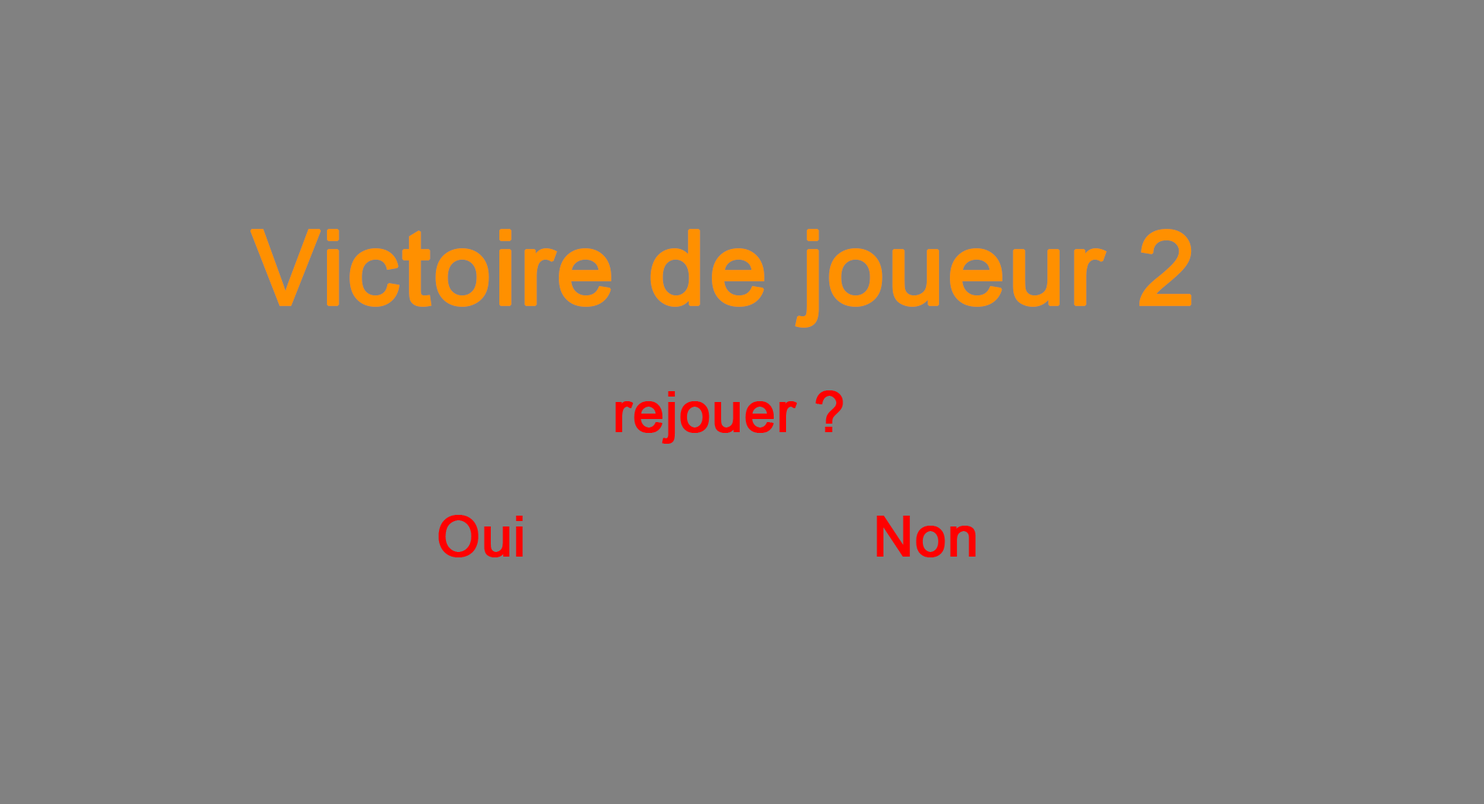
<style>
.page{position:relative;width:1484px;height:804px;background:#818181}
.page>*{position:absolute;margin:0}
.t1{font:103.6px "ArialMT";color:#ff9000;font-weight:bold}
</style>
<div class="page">
<p class="t1" style="left:250px;top:229px;width:942px;height:99px">Victoire de joueur 2</p>
</div>
